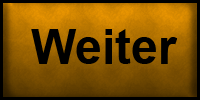
<style>
.page{position:relative;width:200px;height:100px}
.page>*{position:absolute;margin:0}
.t1{font:48px "Arial-BoldMT";color:#000000}
</style>
<div class="page">
<p class="t1" style="left:31px;top:29px;width:147px;height:35px">Weiter</p>
</div>
